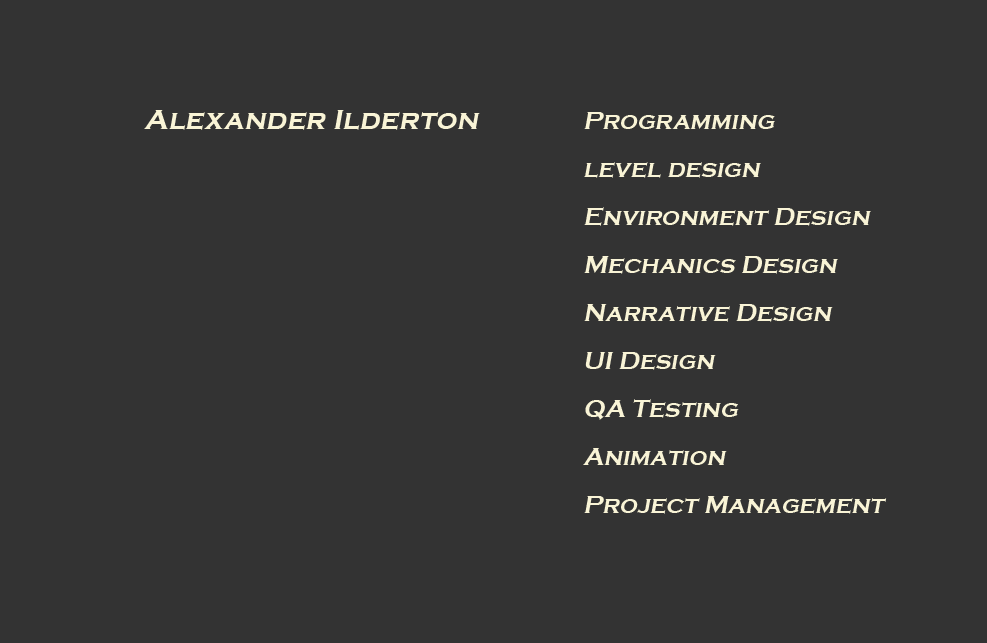
<style>
.page{position:relative;width:987px;height:643px;background:#333333}
.page>*{position:absolute;margin:0}
.t1{font:29.3px "CopperplateGothic-Bold";color:#f9f4d6;font-style:italic}
.t2{font:25px/48px "CopperplateGothic-Bold";color:#f9f4d6;font-style:italic}
</style>
<div class="page">
<p class="t1" style="left:144px;top:110px;width:336px;height:20px">Alexander Ilderton</p>
<p class="t2" style="left:583px;top:112px;width:304px;height:402px">Programming<br>level design<br>Environment Design<br>Mechanics Design<br>Narrative Design<br>UI Design<br>QA Testing<br>Animation<br>Project Management</p>
</div>
